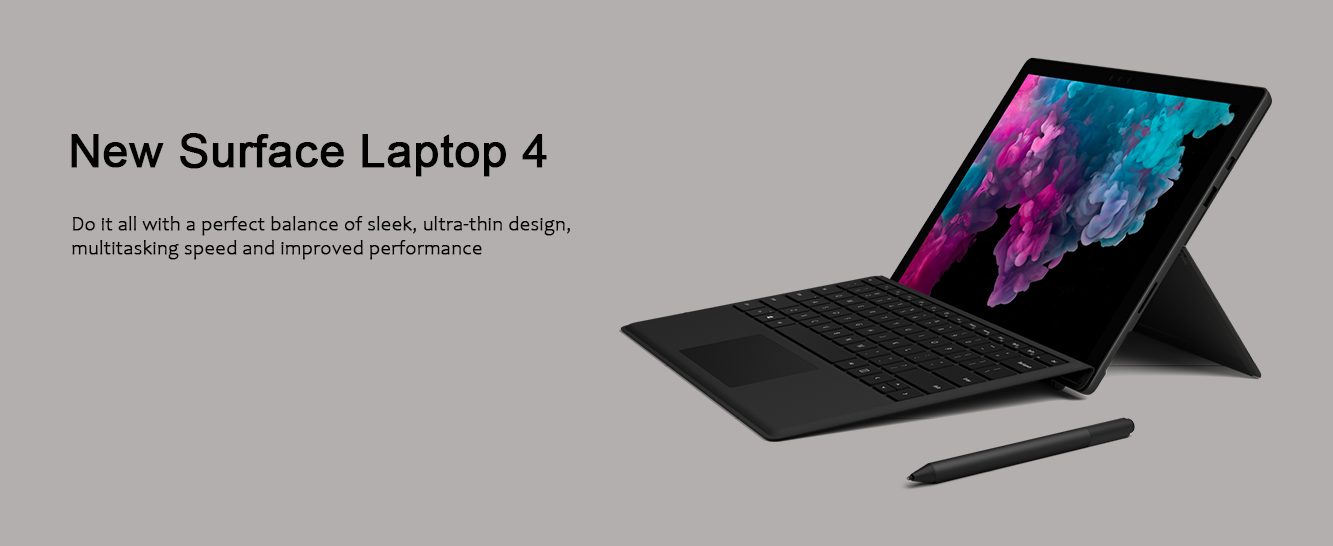
<style>
.page{position:relative;width:1333px;height:546px;background:#b2afae}
.page>*{position:absolute;margin:0}
.t1{font:46.1px "ArialMT";color:#010101;font-weight:bold}
.t2{font:20px "Candara-Light";color:#010101;font-weight:bold}
</style>
<div class="page">
<p class="t1" style="left:71px;top:133px;width:476px;height:44px">New Surface Laptop 4</p>
<p class="t2" style="left:72px;top:216px;width:498px;height:44px;text-align:right">Do it all with a perfect balance of sleek, ultra-thin design, <br>multitasking speed and improved performance</p>
</div>
